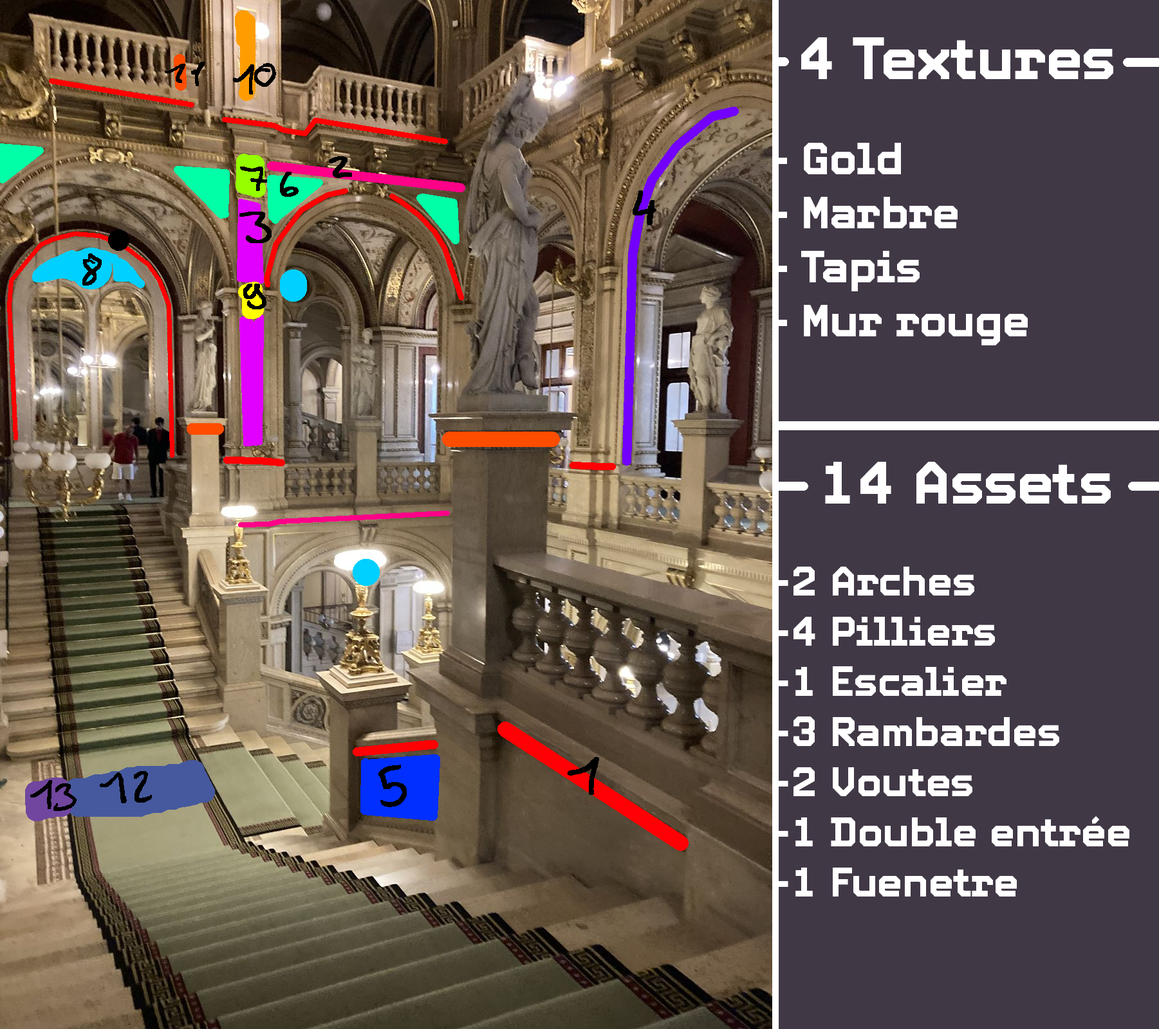
<style>
.page{position:relative;width:1159px;height:1029px;background:#413846}
.page>*{position:absolute;margin:0}
.t1{font:45px "Video-Bold";color:#ffffff}
.t2{font:59.8px "Video-Bold";color:#ffffff}
.t3{font:41.8px "Video-Bold";color:#ffffff}
</style>
<div class="page">
<p class="t1" style="left:773px;top:37px;width:340px;height:308px;text-align:center"><span class="t2">4 Textures<br><br></span>Gold<br>Marbre<br>Tapis<br>Mur rouge</p>
<p class="t3" style="left:775px;top:462px;width:354px;height:435px;text-align:center"><span class="t2">14 Assets<br><br></span>-2 Arches<br>-4 Pilliers<br>-1 Escalier<br>-3 Rambardes<br>-2 Voutes<br>-1 Double entrée<br>-1 Fuenetre</p>
</div>
